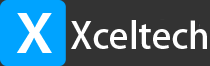
<style>
.page{position:relative;width:210px;height:66px;background:#333333}
.page>*{position:absolute;margin:0}
.t1{font:36px "AdobeHeitiStd-Regular";color:#ffffff}
</style>
<div class="page">
<p class="t1" style="left:71px;top:20px;width:136px;height:29px">Xceltech</p>
</div>
